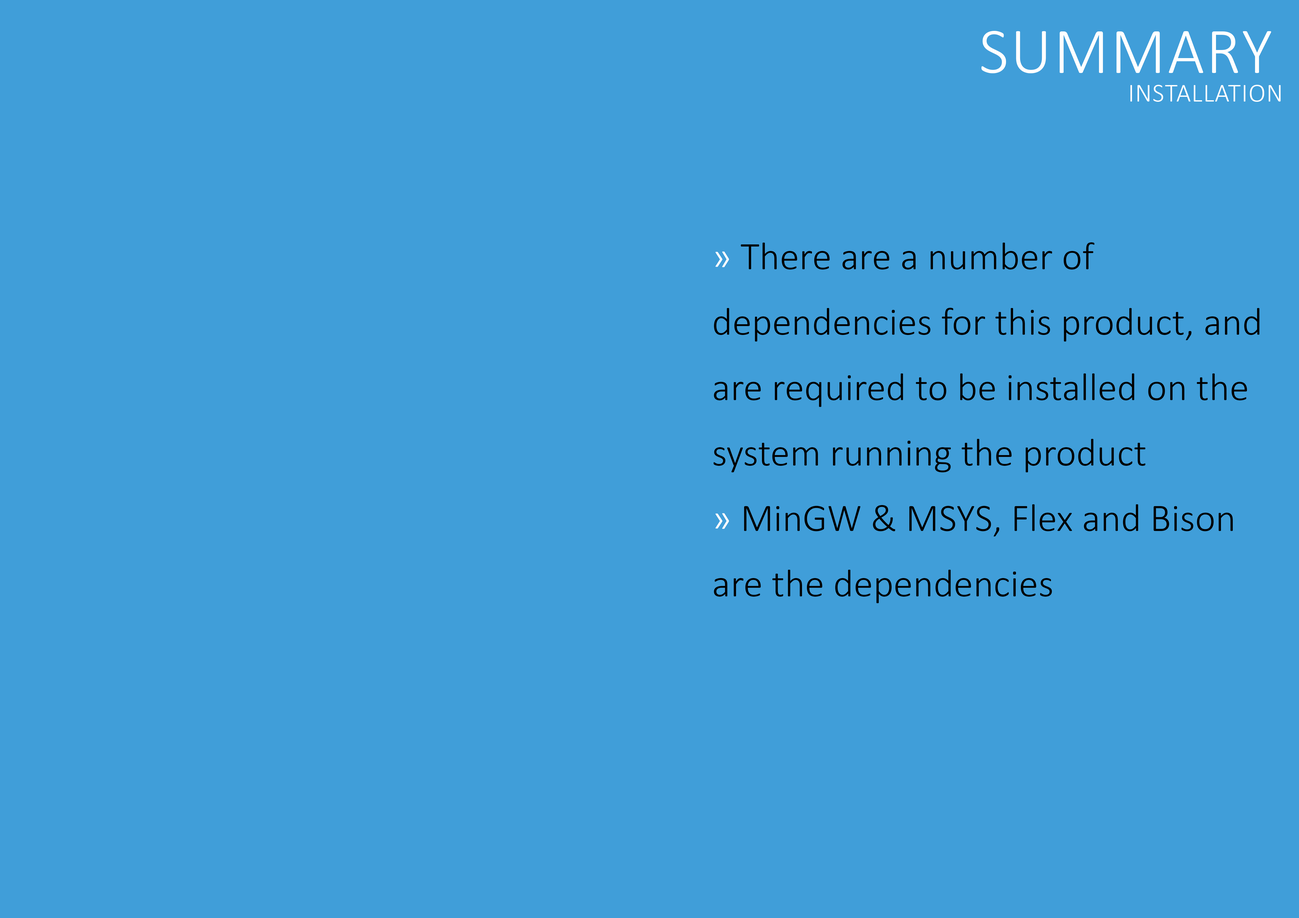
<style>
.page{position:relative;width:1299px;height:918px;background:#409ed9}
.page>*{position:absolute;margin:0}
.t1{font:65.4px "Calibri-Light";letter-spacing:0.025em;color:#ffffff;text-transform:uppercase}
.t2{font:26.2px "Calibri-Light";letter-spacing:0.025em;color:#ffffff;text-transform:uppercase}
.t3{font:39.3px/65.4px "Calibri-Light";color:#000000}
.t4{font:39.3px/65.4px "Calibri-Light";color:#ffffff}
</style>
<div class="page">
<p class="t1" style="left:981px;top:31px;width:290px;height:42px">summary</p>
<p class="t2" style="left:1130px;top:85px;width:150px;height:17px">installation</p>
<p class="t3" style="left:713px;top:242px;width:546px;height:361px"><span class="t4">» </span>There are a number of dependencies for this product, and are required to be installed on the system running the product<br><span class="t4">» </span>MinGW &amp; MSYS, Flex and Bison are the dependencies</p>
</div>
